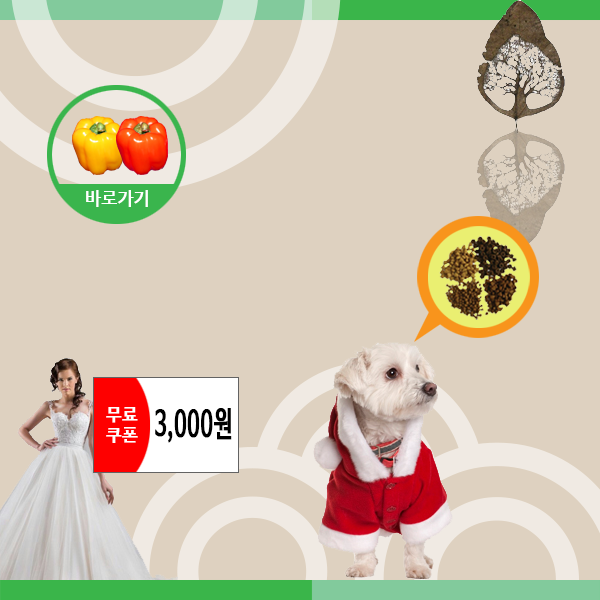
<style>
.page{position:relative;width:600px;height:600px;background:#ded1c0}
.page>*{position:absolute;margin:0}
.t1{font:18.3px "NanumBarunGothicBold";color:#ffffff}
.t2{font:17.6px "NanumBarunGothicBold";color:#ffffff;font-weight:bold}
.t3{font:34.7px "NanumBarunGothicBold";color:#000000;font-weight:bold;scale:0.62 1}
</style>
<div class="page">
<p class="t1" style="left:86px;top:190px;width:62px;height:17px">바로가기</p>
<p class="t2" style="left:106px;top:407px;width:32px;height:36px">무료<br>쿠폰</p>
<p class="t3" style="left:155px;top:408px;width:77px;height:35px">3,000원</p>
</div>
